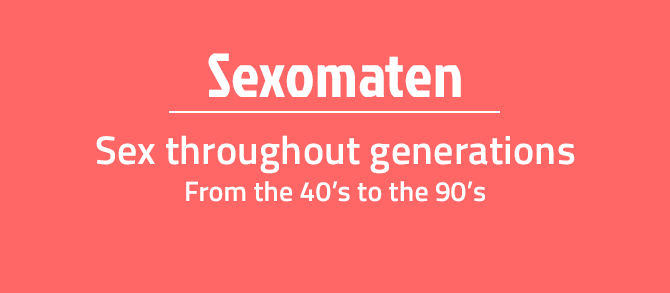
<style>
.page{position:relative;width:670px;height:293px;background:#ff6666}
.page>*{position:absolute;margin:0}
.t1{font:40px/67px "TitilliumWeb-SemiBold";letter-spacing:0.005em;color:#ffffff}
.t2{font:62px "JockeyOne-Regular";letter-spacing:0.005em;color:#ffffff}
.t3{font:28px/37px "TitilliumWeb-SemiBold";letter-spacing:0.005em;color:#ffffff}
</style>
<div class="page">
<p class="t1" style="left:96px;top:53px;width:479px;height:149px;text-align:center"><span class="t2">Sexomaten<br></span>Sex throughout generations<br><span class="t3">From the 40’s to the 90’s</span></p>
</div>
